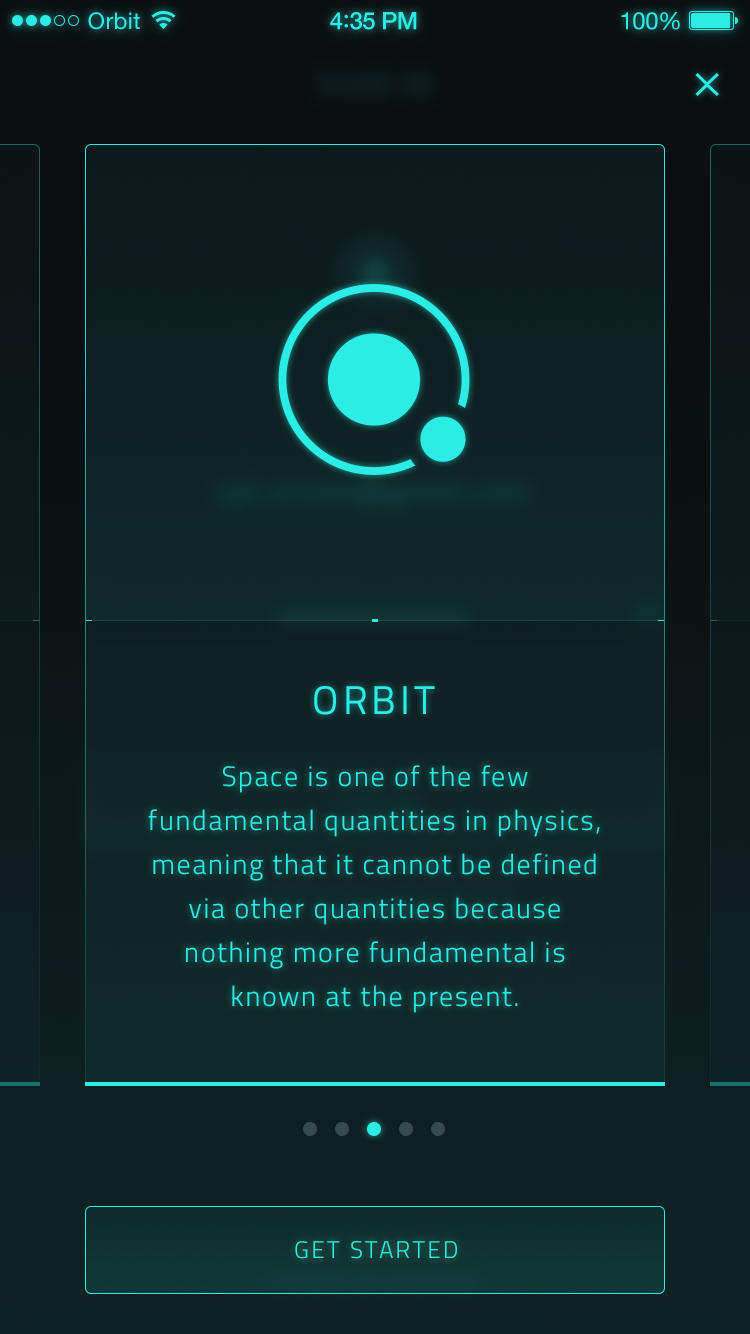
<style>
.page{position:relative;width:750px;height:1334px}
.page>*{position:absolute;margin:0}
.t1{font:23px "HelveticaNeue";letter-spacing:0.02em;color:#2bede6}
.t2{font:24px "HelveticaNeue-Medium";letter-spacing:-0.02em;color:#2bede6}
.t3{font:26px "Avenir-Medium";letter-spacing:-0.02em;color:#2bede6}
.t4{font:24px "HelveticaNeue";letter-spacing:-0.02em;color:#2bede6}
.t5{font:40px "Titillium-Regular";letter-spacing:0.1em;color:#2bede6;text-transform:uppercase}
.t6{font:28px/44px "Titillium-Light";letter-spacing:0.06em;color:#2bede6}
.t7{font:24px "Titillium-Light";letter-spacing:0.1em;color:#2bede6;text-transform:uppercase}
</style>
<div class="page">
<p class="t1" style="left:88px;top:12px;width:52px;height:18px">Orbit</p>
<p class="t2" style="left:330px;top:12px;width:87px;height:18px">4<span class="t3">:</span>35 PM</p>
<p class="t4" style="left:621px;top:12px;width:59px;height:18px">100%</p>
<p class="t5" style="left:314px;top:686px;width:121px;height:29px">Orbit</p>
<p class="t6" style="left:148px;top:765px;width:452px;height:248px;text-align:center">Space is one of the few fundamental quantities in physics, meaning that it cannot be defined via other quantities because nothing more fundamental is known at the present.</p>
<p class="t7" style="left:295px;top:1241px;width:162px;height:18px">Get Started</p>
</div>
